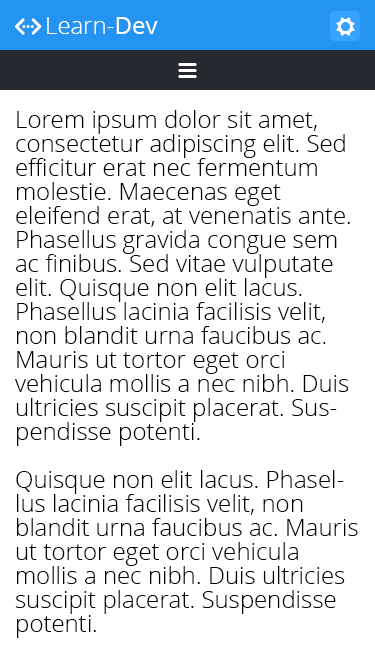
<style>
.page{position:relative;width:375px;height:667px;background:#ffffff}
.page>*{position:absolute;margin:0}
.t1{font:24px "OpenSans-Light";color:#ffffff}
.t2{font:24px "OpenSans";color:#ffffff}
.t3{font:24px/24px "OpenSans-Light";color:#000000}
</style>
<div class="page">
<p class="t1" style="left:47px;top:17px;width:111px;height:17px">Learn-<span class="t2">Dev</span></p>
<p class="t3" style="left:15px;top:110px;width:343px;height:528px">Lorem ipsum dolor sit amet, consectetur adipiscing elit. Sed efficitur erat nec fermentum molestie. Maecenas eget eleifend erat, at venenatis ante. Phasellus gravida congue sem ac finibus. Sed vitae vulputate elit. Quisque non elit lacus. Phasellus lacinia facilisis velit, non blandit urna faucibus ac. Mauris ut tortor eget orci vehicula mollis a nec nibh. Duis ultricies suscipit placerat. Suspendisse potenti.<br><br>Quisque non elit lacus. Phasellus lacinia facilisis velit, non blandit urna faucibus ac. Mauris ut tortor eget orci vehicula mollis a nec nibh. Duis ultricies suscipit placerat. Suspendisse potenti.</p>
</div>
